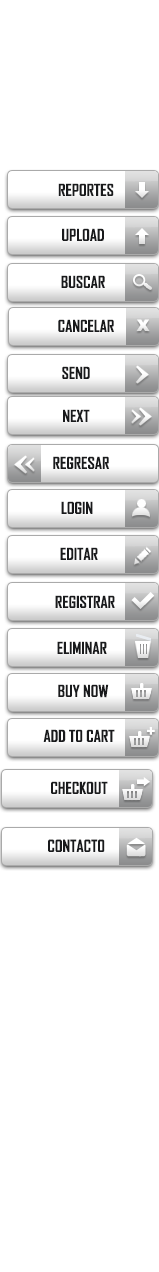
<style>
.page{position:relative;width:159px;height:1272px;background:#ffffff}
.page>*{position:absolute;margin:0}
.t1{font:16px "AgencyFB-Bold";color:#191a1c;text-transform:uppercase}
.t2{font:16px "Arial-Black";color:#ffffff;text-transform:uppercase}
</style>
<div class="page">
<p class="t1" style="left:58px;top:183px;width:56px;height:13px">Reportes</p>
<p class="t1" style="left:62px;top:228px;width:42px;height:13px">upload</p>
<p class="t1" style="left:61px;top:275px;width:44px;height:13px">Buscar</p>
<p class="t1" style="left:58px;top:319px;width:56px;height:13px">cancelar</p>
<p class="t2" style="left:136px;top:319px;width:14px;height:12px">x</p>
<p class="t1" style="left:62px;top:366px;width:28px;height:13px">send</p>
<p class="t1" style="left:63px;top:409px;width:27px;height:13px">next</p>
<p class="t1" style="left:53px;top:456px;width:57px;height:13px">Regresar</p>
<p class="t1" style="left:61px;top:501px;width:32px;height:13px">login</p>
<p class="t1" style="left:60px;top:547px;width:38px;height:13px">Editar</p>
<p class="t1" style="left:55px;top:595px;width:60px;height:13px">Registrar</p>
<p class="t1" style="left:57px;top:641px;width:50px;height:13px">Eliminar</p>
<p class="t1" style="left:58px;top:684px;width:51px;height:14px">buy now</p>
<p class="t1" style="left:43px;top:729px;width:72px;height:13px">add to cart</p>
<p class="t1" style="left:51px;top:781px;width:57px;height:13px">checkout</p>
<p class="t1" style="left:48px;top:839px;width:57px;height:13px">contacto</p>
</div>
